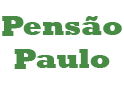
<style>
.page{position:relative;width:124px;height:88px;background:#ffffff}
.page>*{position:absolute;margin:0}
.t1{font:27.8px "Rockwell-ExtraBold";color:#478b45}
</style>
<div class="page">
<p class="t1" style="left:2px;top:16px;width:120px;height:53px;text-align:center">Pensão<br>Paulo</p>
</div>
